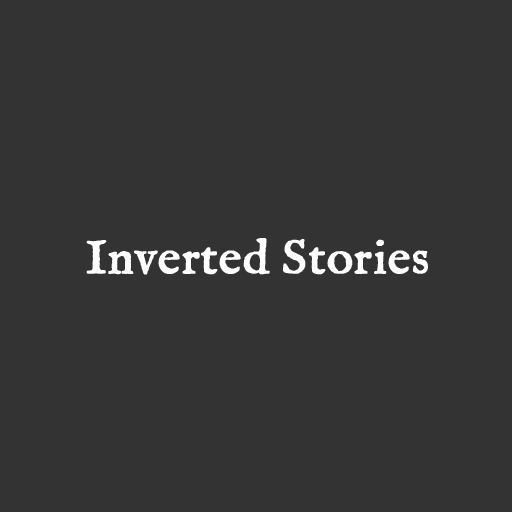
<style>
.page{position:relative;width:512px;height:512px;background:#333333}
.page>*{position:absolute;margin:0}
.t1{font:48px "IM_FELL_English_Roman";color:#ffffff;font-weight:bold}
</style>
<div class="page">
<p class="t1" style="left:86px;top:238px;width:342px;height:37px">Inverted Stories</p>
</div>
